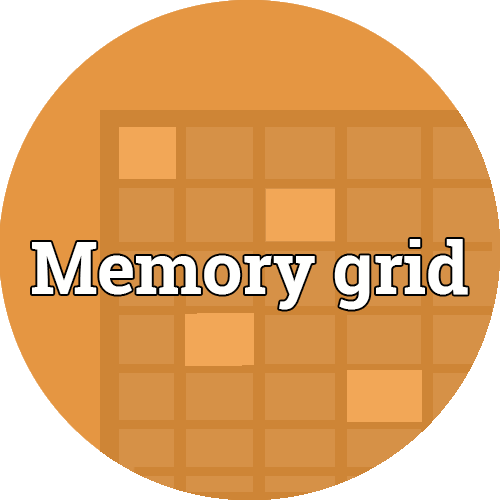
<style>
.page{position:relative;width:500px;height:500px;background:#d69147}
.page>*{position:absolute;margin:0}
.t1{font:71.5px "RobotoSlab-Bold";color:#fffffe}
</style>
<div class="page">
<p class="t1" style="left:32px;top:239px;width:436px;height:71px">Memory grid</p>
</div>
